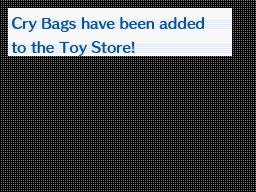
<style>
.page{position:relative;width:256px;height:192px;background:#000000}
.page>*{position:absolute;margin:0}
.t1{font:13.3px/24px "HummingStd-B";color:#005898}
</style>
<div class="page">
<p class="t1" style="left:11px;top:17px;width:194px;height:39px">Cry Bags have been added<br>to the Toy Store!</p>
</div>
